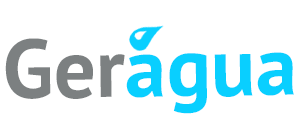
<style>
.page{position:relative;width:300px;height:120px;background:#ffffff}
.page>*{position:absolute;margin:0}
.t1{font:83px "PTSans-Bold";color:#09cfff}
.t2{font:83px "PTSans-Bold";color:#7c8081}
</style>
<div class="page">
<p class="t1" style="left:5px;top:38px;width:289px;height:76px;rotate:-1deg"><span class="t2">Ger</span>agua</p>
</div>
